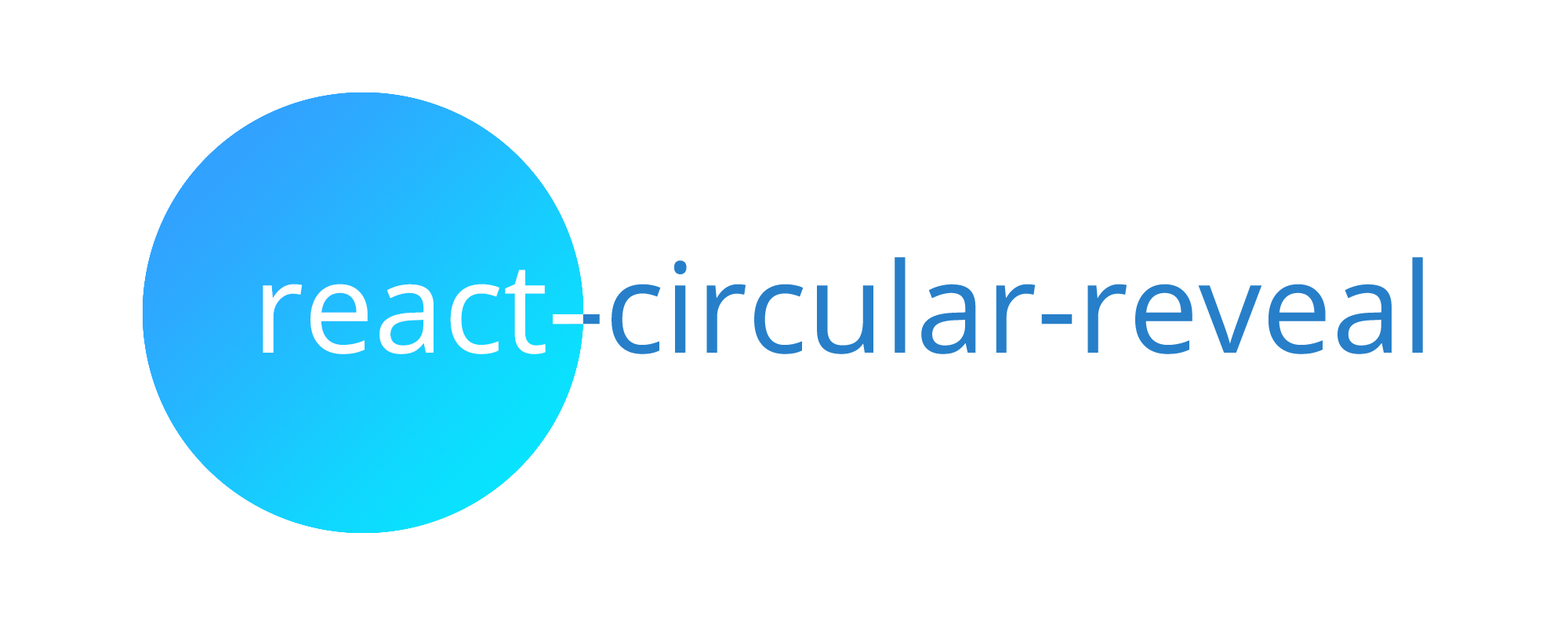
<style>
.page{position:relative;width:1568px;height:627px;background:#ffffff}
.page>*{position:absolute;margin:0}
.t1{font:125.4px "OpenSans-Regular";color:#277fc9}
.t2{font:125.4px "OpenSans-Regular";color:#ffffff}
</style>
<div class="page">
<p class="t1" style="left:569px;top:257px;width:854px;height:97px">-circular-reveal</p>
<p class="t2" style="left:263px;top:270px;width:320px;height:84px">react-</p>
</div>
